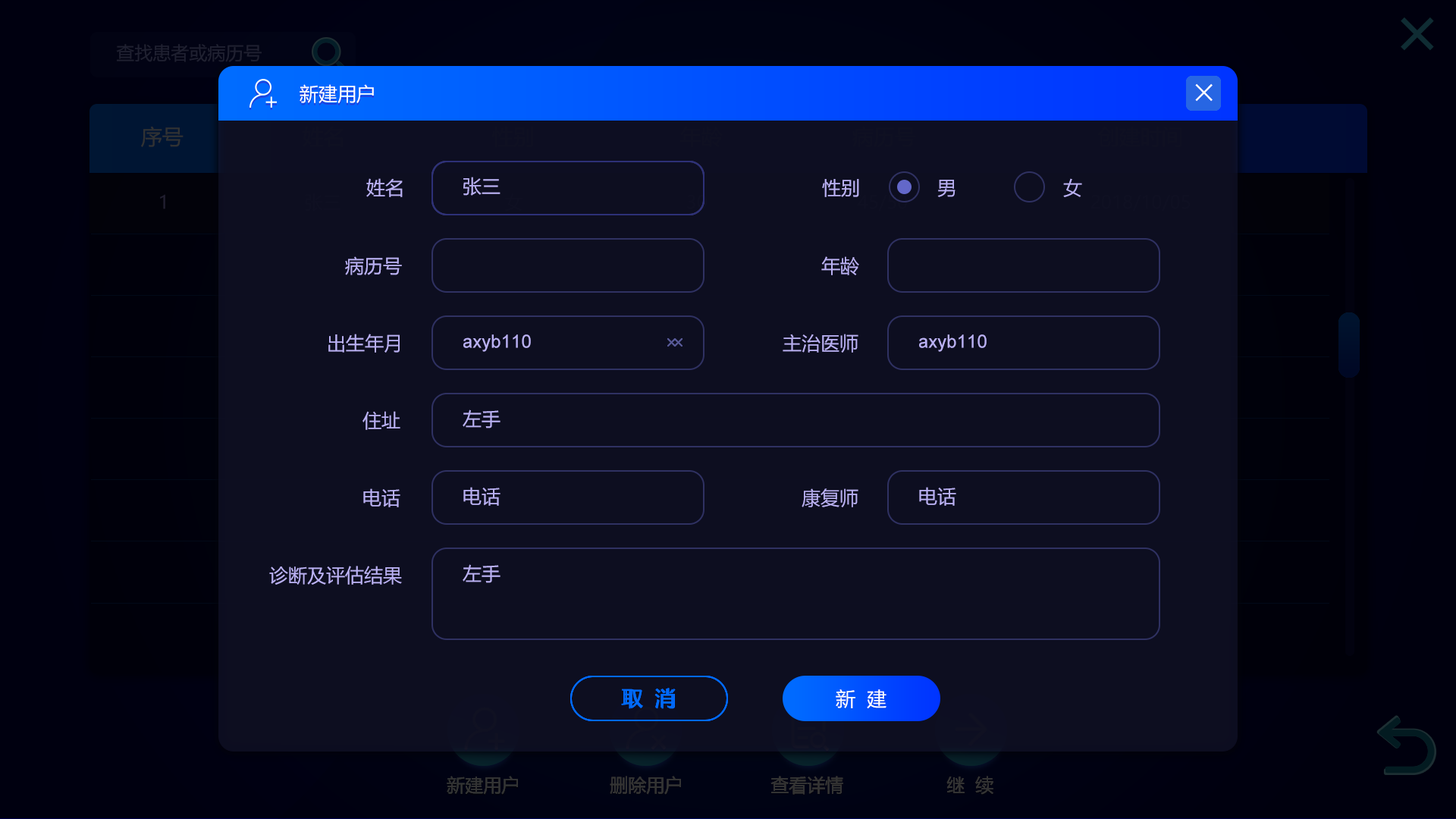
<style>
.page{position:relative;width:1456px;height:819px;background:#0d0e20}
.page>*{position:absolute;margin:0}
.t1{font:19px "MicrosoftYaHei";color:#ffffff}
.t2{font:40.9px "MicrosoftYaHeiLight";color:#ffffff}
.t3{font:19px "MicrosoftYaHei";color:#bab1f4}
.t4{font:18.2px "ArialMT";color:#bab1f4}
.t5{font:21.2px "MicrosoftYaHei";color:#006bff}
.t6{font:19.7px "MicrosoftYaHei";color:#006bff}
.t7{font:19.7px "MicrosoftYaHei";color:#ffffff}
</style>
<div class="page">
<p class="t1" style="left:300px;top:84px;width:74px;height:20px">新建用户</p>
<p class="t2" style="left:1195px;top:83px;width:18px;height:19px">×</p>
<p class="t2" style="left:1195px;top:83px;width:18px;height:19px">×</p>
<p class="t2" style="left:1195px;top:83px;width:18px;height:19px">×</p>
<p class="t3" style="left:366px;top:178px;width:37px;height:19px">姓名</p>
<p class="t3" style="left:463px;top:177px;width:37px;height:19px">张三</p>
<p class="t3" style="left:822px;top:179px;width:37px;height:18px">性别</p>
<p class="t3" style="left:937px;top:180px;width:18px;height:17px">男</p>
<p class="t3" style="left:1063px;top:178px;width:19px;height:19px">女</p>
<p class="t3" style="left:345px;top:256px;width:57px;height:19px">病历号</p>
<p class="t3" style="left:821px;top:256px;width:38px;height:19px">年龄</p>
<p class="t3" style="left:328px;top:334px;width:72px;height:19px">出生年月</p>
<p class="t4" style="left:463px;top:334px;width:68px;height:18px">axyb110</p>
<p class="t3" style="left:783px;top:334px;width:75px;height:19px">主治医师</p>
<p class="t4" style="left:919px;top:334px;width:68px;height:18px">axyb110</p>
<p class="t3" style="left:362px;top:411px;width:38px;height:19px">住址</p>
<p class="t3" style="left:463px;top:409px;width:37px;height:19px">左手</p>
<p class="t3" style="left:363px;top:488px;width:37px;height:19px">电话</p>
<p class="t3" style="left:463px;top:487px;width:37px;height:19px">电话</p>
<p class="t3" style="left:802px;top:488px;width:56px;height:19px">康复师</p>
<p class="t3" style="left:919px;top:487px;width:37px;height:19px">电话</p>
<p class="t3" style="left:269px;top:566px;width:133px;height:19px">诊断及评估结果</p>
<p class="t3" style="left:463px;top:564px;width:37px;height:19px">左手</p>
<p class="t5" style="left:621px;top:688px;width:55px;height:21px">取  消</p>
<p class="t6" style="left:623px;top:689px;width:50px;height:19px">取  消</p>
<p class="t6" style="left:623px;top:689px;width:50px;height:19px">取  消</p>
<p class="t7" style="left:836px;top:689px;width:50px;height:20px">新  建</p>
</div>
